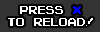
<style>
.page{position:relative;width:100px;height:32px;background:#333333}
.page>*{position:absolute;margin:0}
.t1{font:12px/12px "PixelEmulator";color:#ffffff}
.t2{font:12px/12px "PixelEmulator";color:#0000ff}
</style>
<div class="page">
<p class="t1" style="left:8px;top:6px;width:85px;height:20px;text-align:center">press <span class="t2">X<br></span>to RELOAD!</p>
</div>
